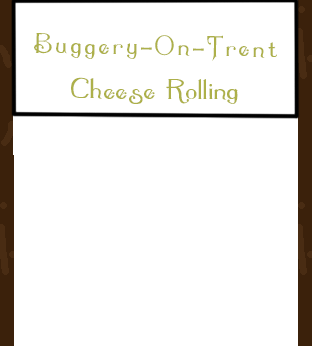
<style>
.page{position:relative;width:312px;height:346px;background:#ffffff}
.page>*{position:absolute;margin:0}
.t1{font:40px/221.7px "Summertime";letter-spacing:0.07em;color:#adb04a;scale:0.93 1}
.t2{font:47.7px/221.7px "Summertime";letter-spacing:0.07em;color:#adb04a;scale:0.93 1}
.t3{font:9.9px/221.7px "Summertime";letter-spacing:0.07em;color:#adb04a;scale:0.93 1}
.t4{font:40.2px "Summertime";color:#adb04a}
</style>
<div class="page">
<p class="t1" style="left:34px;top:33px;width:243px;height:28px;text-align:center;rotate:1deg">Buggery-On-Trent<br><span class="t2"><br><br></span><span class="t3">Cheese Rolling!</span></p>
<p class="t4" style="left:71px;top:77px;width:167px;height:27px">Cheese Rolling</p>
</div>
